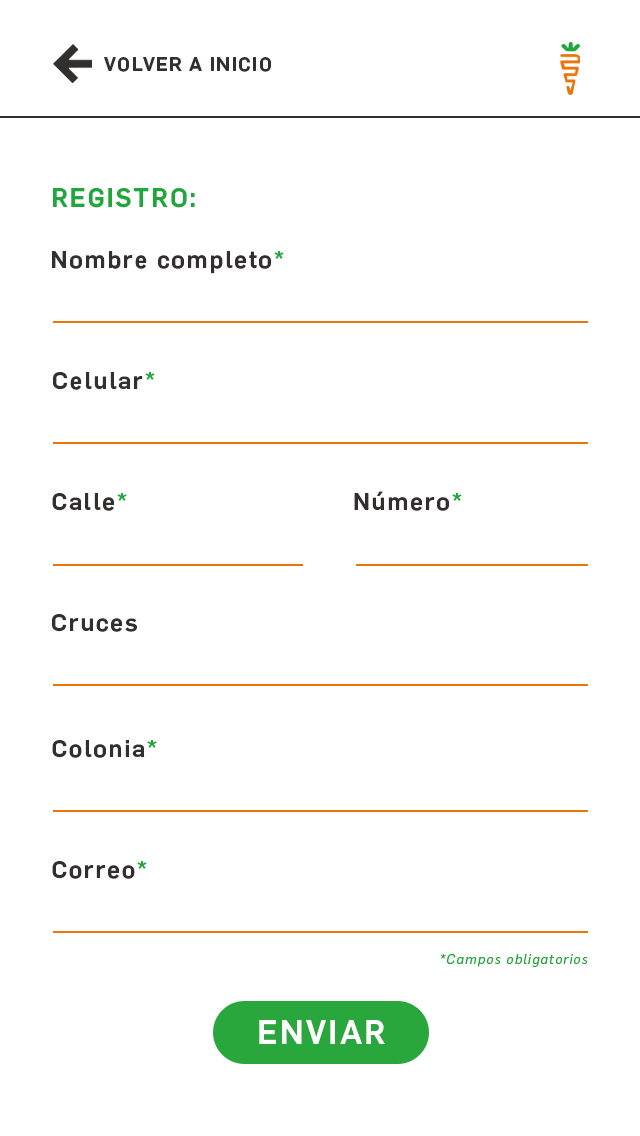
<style>
.page{position:relative;width:640px;height:1136px;background:#ffffff}
.page>*{position:absolute;margin:0}
.t1{font:19.1px "Flama-Medium";letter-spacing:0.075em;color:#332f2e}
.t2{font:26px "Flama-Medium";letter-spacing:0.075em;color:#1fa73c}
.t3{font:24px "Flama-Medium";letter-spacing:0.075em;color:#332f2e}
.t4{font:24px "Flama-Medium";letter-spacing:0.075em;color:#1fa73c}
.t5{font:14px "Flama-BookItalic";letter-spacing:0.075em;color:#1fa73c}
</style>
<div class="page">
<p class="t1" style="left:104px;top:57px;width:167px;height:15px">VOLVER A INICIO</p>
<p class="t2" style="left:53px;top:188px;width:142px;height:20px">REGISTRO:</p>
<p class="t3" style="left:52px;top:251px;width:232px;height:23px">Nombre completo<span class="t4">*</span></p>
<p class="t3" style="left:53px;top:372px;width:102px;height:18px">Celular<span class="t4">*</span></p>
<p class="t3" style="left:52px;top:493px;width:75px;height:18px">Calle<span class="t4">*</span></p>
<p class="t3" style="left:354px;top:491px;width:108px;height:20px">Número<span class="t4">*</span></p>
<p class="t3" style="left:52px;top:614px;width:85px;height:18px">Cruces</p>
<p class="t3" style="left:52px;top:740px;width:105px;height:18px">Colonia<span class="t4">*</span></p>
<p class="t3" style="left:52px;top:861px;width:95px;height:18px">Correo<span class="t4">*</span></p>
<p class="t5" style="left:441px;top:954px;width:147px;height:13px">*Campos obligatorios</p>
</div>
